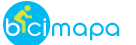
<style>
.page{position:relative;width:136px;height:45px;background:#ffffff}
.page>*{position:absolute;margin:0}
.t1{font:26.2px "SFNewRepublic";color:#ffffff}
.t2{font:20.6px "SFNewRepublic";color:#ffffff}
.t3{font:26.2px "SFNewRepublic";color:#01b9f0}
</style>
<div class="page">
<p class="t1" style="left:6px;top:18px;width:14px;height:18px">b</p>
<p class="t2" style="left:27px;top:18px;width:19px;height:18px">C<span class="t1">i</span></p>
<p class="t3" style="left:52px;top:22px;width:68px;height:19px">mapa</p>
</div>
